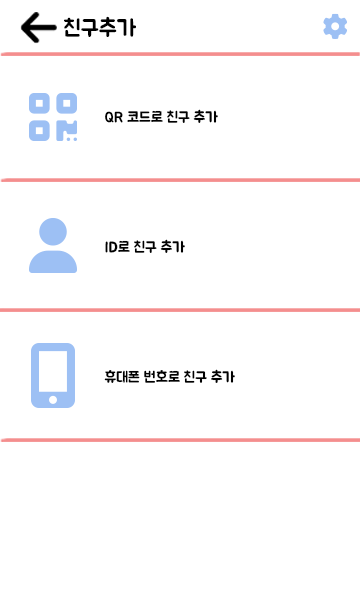
<style>
.page{position:relative;width:360px;height:600px;background:#ffffff}
.page>*{position:absolute;margin:0}
.t1{font:23px "BMJUA";color:#000000}
.t2{font:15px "BMJUA";color:#000000}
</style>
<div class="page">
<p class="t1" style="left:64px;top:16px;width:72px;height:21px">친구추가</p>
<p class="t2" style="left:105px;top:109px;width:113px;height:14px">QR 코드로 친구 추가</p>
<p class="t2" style="left:105px;top:239px;width:80px;height:14px">ID로 친구 추가</p>
<p class="t2" style="left:104px;top:369px;width:131px;height:14px">휴대폰 번호로 친구 추가</p>
</div>
